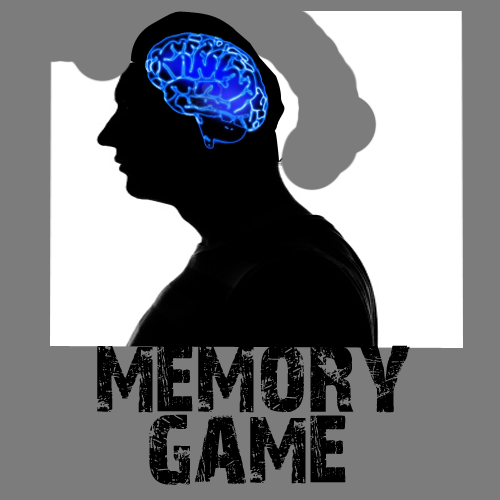
<style>
.page{position:relative;width:500px;height:500px;background:#7c7c7c}
.page>*{position:absolute;margin:0}
.t1{font:100px "28DaysLater";color:#000000}
</style>
<div class="page">
<p class="t1" style="left:97px;top:344px;width:313px;height:69px">memory</p>
<p class="t1" style="left:149px;top:414px;width:197px;height:71px">game</p>
</div>
